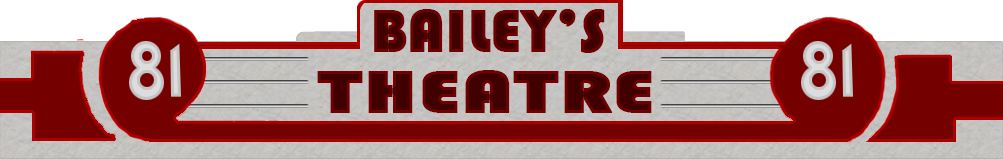
<style>
.page{position:relative;width:1003px;height:159px;background:#750000}
.page>*{position:absolute;margin:0}
.t1{font:62px "Bauhaus93";font-weight:bold}
.t2{font:62px "Bauhaus93";font-weight:bold;scale:1.37 1}
</style>
<div class="page">
<p class="t1" style="left:374px;top:9px;width:231px;height:44px">BAILEY’S</p>
<p class="t2" style="left:317px;top:70px;width:335px;height:43px">THEATRE</p>
</div>
